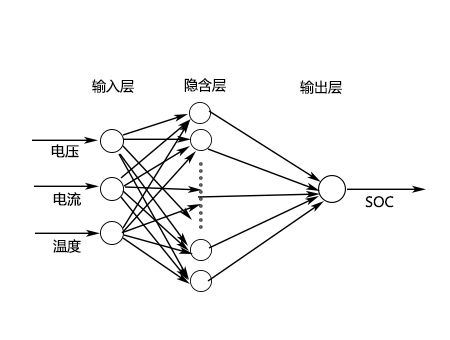
<style>
.page{position:relative;width:450px;height:340px;background:#ffffff}
.page>*{position:absolute;margin:0}
.t1{font:14px "MicrosoftYaHei";color:#000000}
.t2{font:14px "MicrosoftYaHei"}
</style>
<div class="page">
<p class="t1" style="left:184px;top:78px;width:42px;height:14px">隐含层</p>
<p class="t1" style="left:92px;top:79px;width:42px;height:14px">输入层</p>
<p class="t1" style="left:300px;top:80px;width:42px;height:14px">输出层</p>
<p class="t1" style="left:51px;top:144px;width:28px;height:14px">电压</p>
<p class="t2" style="left:199px;top:162px;width:4px;height:67px">。。。。。。。。。。</p>
<p class="t1" style="left:53px;top:192px;width:28px;height:14px">电流</p>
<p class="t1" style="left:365px;top:196px;width:29px;height:12px">SOC</p>
<p class="t1" style="left:53px;top:239px;width:28px;height:14px">温度</p>
</div>
